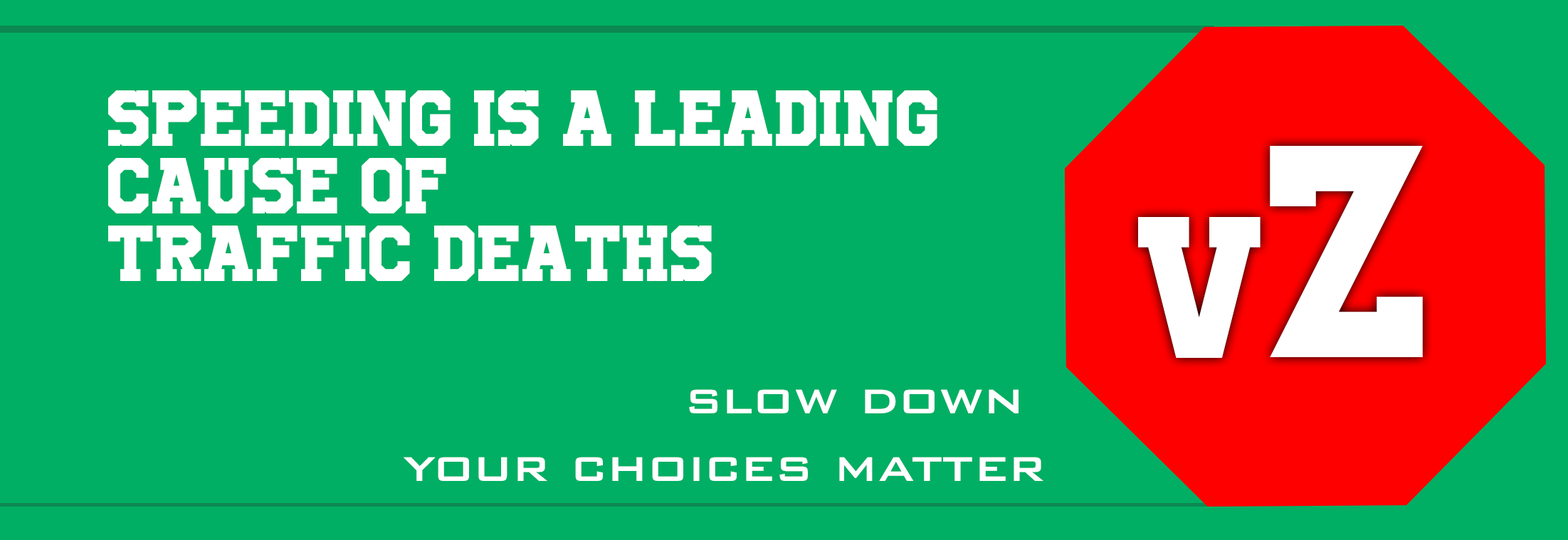
<style>
.page{position:relative;width:1568px;height:540px;background:#00af63}
.page>*{position:absolute;margin:0}
.t1{font:55.8px "UniversityRegular";color:#ffffff}
.t2{font:140.9px "UniversityRegular";color:#ffffff}
.t3{font:211.4px "UniversityRegular";color:#ffffff}
.t4{font:55.8px "BankGothicBold";color:#ffffff}
</style>
<div class="page">
<p class="t1" style="left:108px;top:90px;width:829px;height:191px">speeding is a leading <br>cause of <br>traffic deaths</p>
<p class="t2" style="left:1138px;top:146px;width:285px;height:212px">v<span class="t3">z</span></p>
<p class="t4" style="left:404px;top:389px;width:639px;height:92px;text-align:right">slow down <br>your choices matter</p>
</div>
